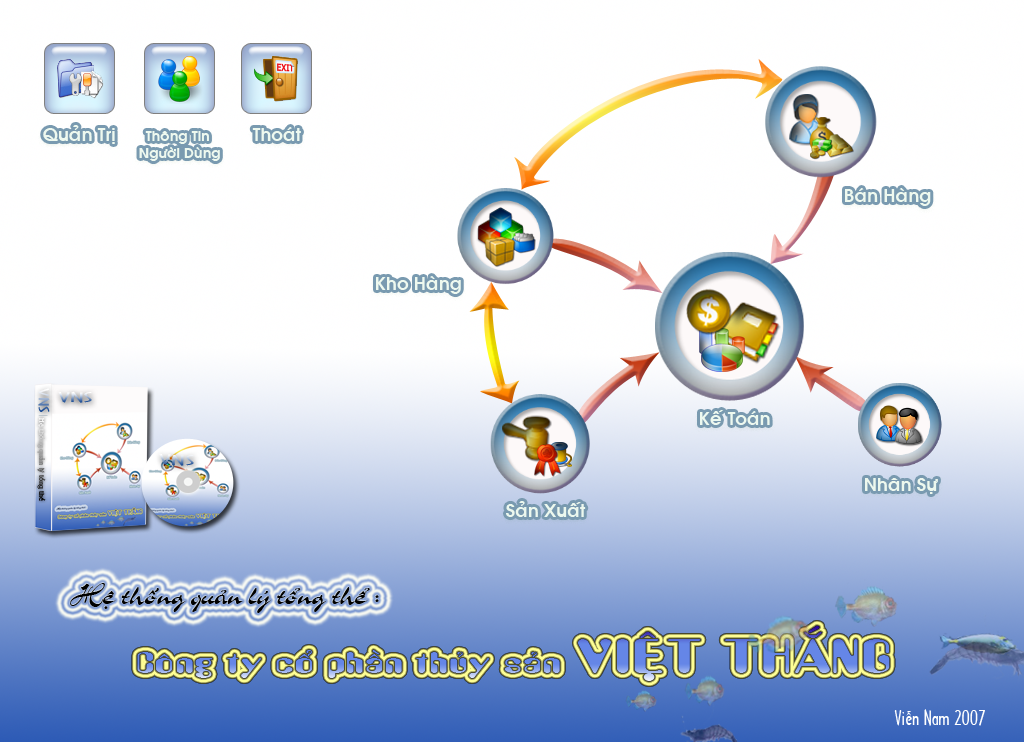
<style>
.page{position:relative;width:1024px;height:742px}
.page>*{position:absolute;margin:0}
.t1{font:18px "VNI-Avo-Bold";color:#eef9ef}
.t2{font:14px "VNI-Avo-Bold";color:#eef9ef}
.t3{font:13px "NVTArchitectureNormal";scale:1.77 1}
.t4{font:12.8px "NVTArchitectureNormal";scale:2.6 1}
.t5{font:18px "VNI-Avo-Bold";color:#edf9ef}
.t6{font:7.1px "NVTBenguiatNormal";scale:0.95 1}
.t7{font:18px "VNI-Avo-Bold";color:#edf8ee}
.t8{font:18px "VNI-Avo-Bold";color:#ecf8ee}
.t9{font:31.2px "VNI-Slogan";color:#000000}
.t10{font:26px "NVTAmyNormal";color:#6586e7;scale:1.41 1}
.t11{font:41.6px "NVTAmyNormal";color:#6586e7;scale:1.41 1}
.t12{font:19.1px "NVTArchitectureNormal";color:#ffffff}
</style>
<div class="page">
<p class="t1" style="left:43px;top:125px;width:72px;height:19px">Quaûn Trò</p>
<p class="t2" style="left:139px;top:131px;width:81px;height:30px;text-align:center">Thoâng Tin <br>Ngöôøi Duøng</p>
<p class="t1" style="left:252px;top:127px;width:49px;height:14px">Thoaùt</p>
<p class="t1" style="left:845px;top:188px;width:86px;height:18px">Baùn Haøng</p>
<p class="t1" style="left:376px;top:276px;width:85px;height:18px">Kho Haøng</p>
<p class="t3" style="left:38px;top:388px;width:12px;height:24px;rotate:90deg">VNS</p>
<p class="t4" style="left:58px;top:391px;width:34px;height:12px;rotate:2deg">VNS</p>
<p class="t5" style="left:700px;top:410px;width:70px;height:15px">Keá Toaùn</p>
<p class="t6" style="left:37px;top:418px;width:9px;height:83px;rotate:90deg">Heä thoáng quaûn lyù toång theå</p>
<p class="t7" style="left:865px;top:478px;width:73px;height:16px">Nhaân Söï</p>
<p class="t8" style="left:506px;top:501px;width:80px;height:16px">Saûn Xuaát</p>
<p class="t9" style="left:70px;top:583px;width:309px;height:30px">Heä thoáng quaûn lyù toång theå :</p>
<p class="t10" style="left:137px;top:626px;width:753px;height:55px">Coâng ty coå phaàn thuûy saûn <span class="t11">VIEÄT THAÉNG</span></p>
<p class="t12" style="left:894px;top:709px;width:91px;height:17px">Vieãn Nam 2007</p>
</div>
